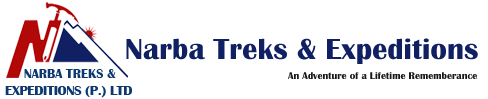
<style>
.page{position:relative;width:488px;height:99px;background:#ffffff}
.page>*{position:absolute;margin:0}
.t1{font:30px "BritannicBold";letter-spacing:0.005em;color:#112063}
.t2{font:10px "BritannicBold";letter-spacing:0.005em;color:#191919}
</style>
<div class="page">
<p class="t1" style="left:126px;top:38px;width:352px;height:26px">Narba Treks &amp; Expeditions</p>
<p class="t2" style="left:288px;top:72px;width:189px;height:7px">An Adventure of a Lifetime Rememberance</p>
</div>
